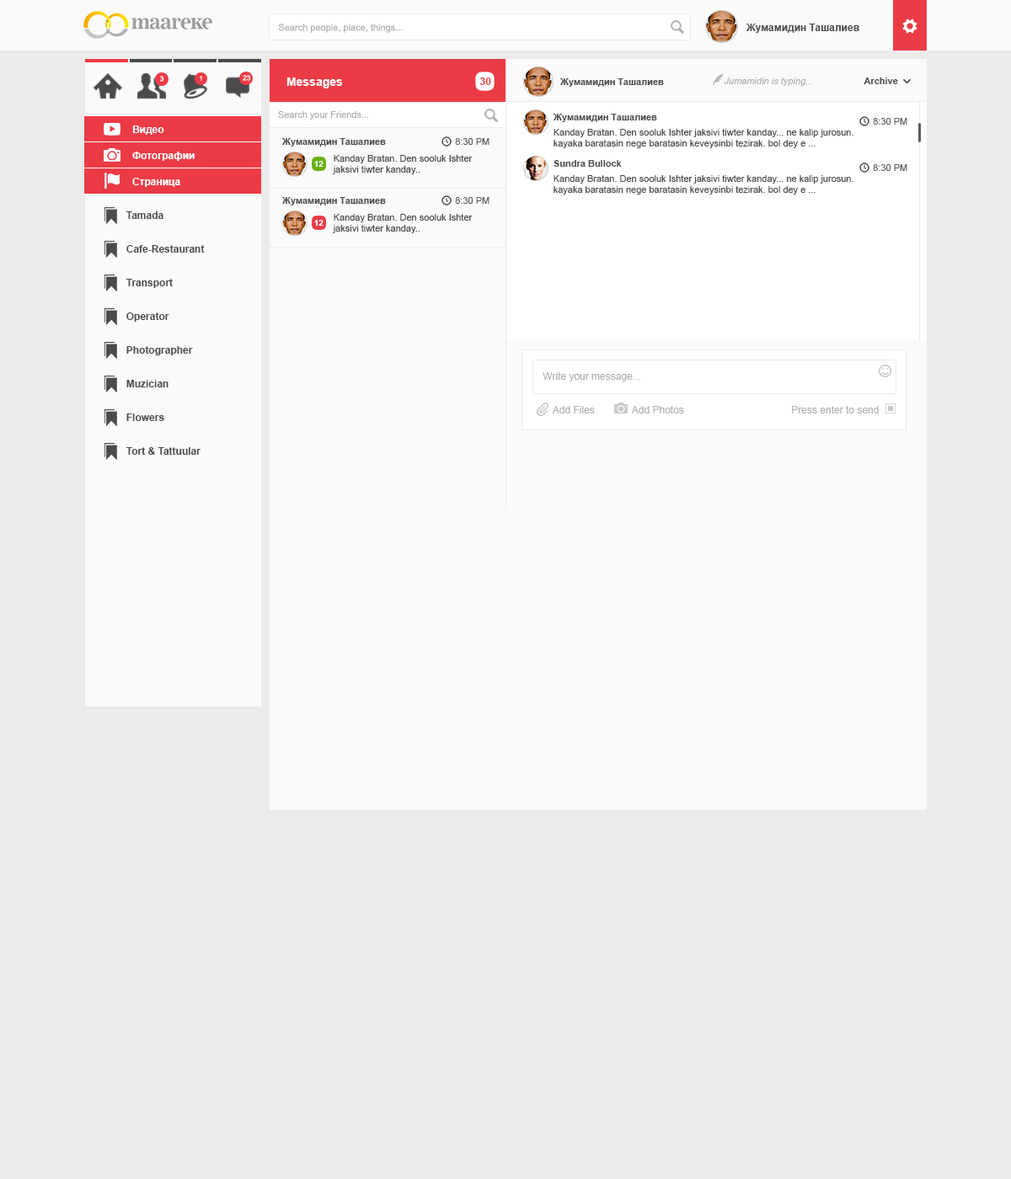
<style>
.page{position:relative;width:1011px;height:1179px;background:#edeaea}
.page>*{position:absolute;margin:0}
.t1{font:9.3px "ArialMT";color:#b2afaf}
.t2{font:10.1px "Arial-BoldMT";color:#4c4a4a}
.t3{font:7.1px "ArialMT";color:#fefafa}
.t4{font:6.7px "ArialMT";color:#fefafa}
.t5{font:11.8px "Arial-BoldMT";color:#fffefe}
.t6{font:10.1px "Arial-BoldMT";color:#eb3b46}
.t7{font:9.3px "Arial-ItalicMT";color:#b2afaf}
.t8{font:9.3px "Arial-BoldMT";color:#4c4a4a}
.t9{font:10.1px "Arial-BoldMT";color:#ffffff}
.t10{font:9.3px "ArialMT";color:#5d5b5b}
.t11{font:9.3px "ArialMT";color:#4c4a4a}
.t12{font:8.4px "Arial-BoldMT";color:#ffffff}
.t13{font:10.1px "ArialMT";color:#b2afaf}
</style>
<div class="page">
<p class="t1" style="left:278px;top:24px;width:125px;height:9px">Search people, place, things...</p>
<p class="t2" style="left:746px;top:24px;width:113px;height:9px">Жумамидин Ташалиев</p>
<p class="t3" style="left:160px;top:76px;width:4px;height:6px">3</p>
<p class="t4" style="left:200px;top:76px;width:2px;height:5px">1</p>
<p class="t3" style="left:243px;top:75px;width:8px;height:6px">23</p>
<p class="t5" style="left:286px;top:78px;width:57px;height:10px">Messages</p>
<p class="t6" style="left:479px;top:78px;width:12px;height:7px">30</p>
<p class="t7" style="left:724px;top:78px;width:89px;height:8px">Jumamidin is typing...</p>
<p class="t8" style="left:864px;top:78px;width:34px;height:6px">Archive</p>
<p class="t8" style="left:560px;top:78px;width:104px;height:9px">Жумамидин Ташалиев</p>
<p class="t1" style="left:278px;top:111px;width:91px;height:9px">Search your Friends...</p>
<p class="t8" style="left:554px;top:114px;width:103px;height:8px">Жумамидин Ташалиев</p>
<p class="t9" style="left:132px;top:126px;width:32px;height:9px">Видео</p>
<p class="t10" style="left:873px;top:118px;width:34px;height:7px">8:30 PM</p>
<p class="t11" style="left:554px;top:129px;width:299px;height:19px">Kanday Bratan. Den sooluk Ishter jaksivi tiwter kanday... ne kalip jurosun. kayaka baratasin nege baratasin keveysinbi tezirak. bol dey e ...</p>
<p class="t8" style="left:282px;top:138px;width:104px;height:9px">Жумамидин Ташалиев</p>
<p class="t10" style="left:455px;top:138px;width:34px;height:7px">8:30 PM</p>
<p class="t9" style="left:132px;top:152px;width:63px;height:9px">Фотографии</p>
<p class="t12" style="left:314px;top:161px;width:10px;height:6px">12</p>
<p class="t11" style="left:333px;top:155px;width:140px;height:19px">Kanday Bratan. Den sooluk Ishter jaksivi tiwter kanday..</p>
<p class="t8" style="left:554px;top:160px;width:68px;height:7px">Sundra Bullock</p>
<p class="t10" style="left:873px;top:164px;width:34px;height:7px">8:30 PM</p>
<p class="t9" style="left:132px;top:178px;width:48px;height:9px">Страница</p>
<p class="t11" style="left:554px;top:175px;width:299px;height:20px">Kanday Bratan. Den sooluk Ishter jaksivi tiwter kanday... ne kalip jurosun. kayaka baratasin nege baratasin keveysinbi tezirak. bol dey e ...</p>
<p class="t8" style="left:282px;top:197px;width:104px;height:9px">Жумамидин Ташалиев</p>
<p class="t10" style="left:455px;top:197px;width:34px;height:7px">8:30 PM</p>
<p class="t2" style="left:126px;top:211px;width:37px;height:8px">Tamada</p>
<p class="t12" style="left:314px;top:220px;width:10px;height:6px">12</p>
<p class="t11" style="left:333px;top:214px;width:140px;height:19px">Kanday Bratan. Den sooluk Ishter jaksivi tiwter kanday..</p>
<p class="t2" style="left:126px;top:245px;width:79px;height:8px">Cafe-Restaurant</p>
<p class="t2" style="left:126px;top:279px;width:47px;height:9px">Transport</p>
<p class="t2" style="left:126px;top:313px;width:43px;height:9px">Operator</p>
<p class="t2" style="left:126px;top:346px;width:67px;height:10px">Photographer</p>
<p class="t13" style="left:543px;top:372px;width:97px;height:10px">Write your message...</p>
<p class="t2" style="left:126px;top:380px;width:42px;height:8px">Muzician</p>
<p class="t2" style="left:126px;top:414px;width:38px;height:7px">Flowers</p>
<p class="t13" style="left:552px;top:406px;width:43px;height:8px">Add Files</p>
<p class="t13" style="left:631px;top:406px;width:53px;height:8px">Add Photos</p>
<p class="t13" style="left:792px;top:406px;width:87px;height:8px">Press enter to send</p>
<p class="t2" style="left:126px;top:447px;width:75px;height:8px">Tort &amp; Tattuular</p>
</div>
